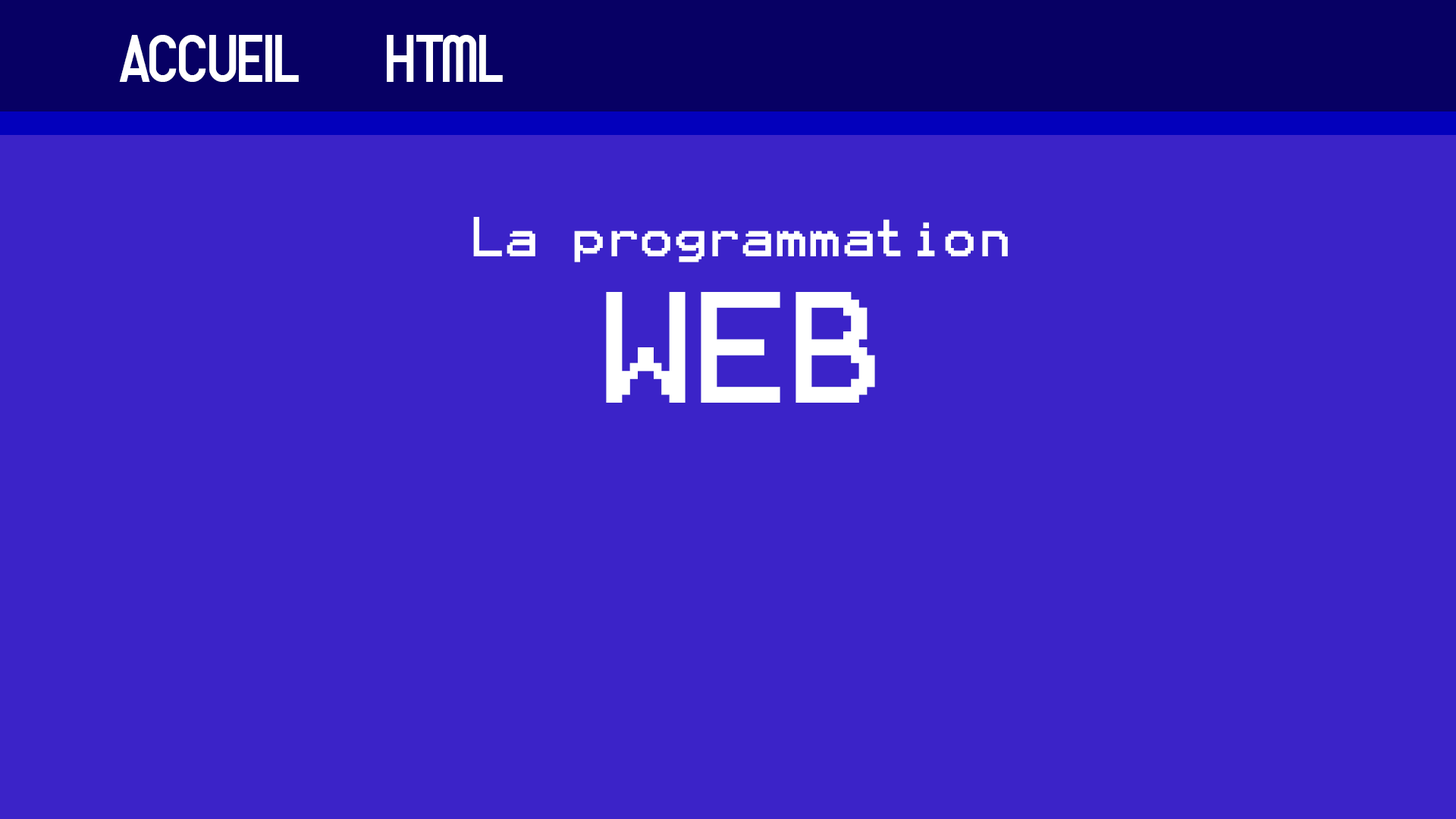
<style>
.page{position:relative;width:1456px;height:819px;background:#3b23c8}
.page>*{position:absolute;margin:0}
.t1{font:68.8px "MonsterTwenty";color:#ffffff}
.t2{font:45px "Terminal";color:#ffffff}
.t3{font:126.6px "Terminal";color:#ffffff}
</style>
<div class="page">
<p class="t1" style="left:119px;top:35px;width:180px;height:47px">Accueil</p>
<p class="t1" style="left:387px;top:35px;width:116px;height:47px">HTML</p>
<p class="t2" style="left:473px;top:217px;width:535px;height:45px">La programmation</p>
<p class="t3" style="left:606px;top:292px;width:269px;height:111px">WEB</p>
</div>
